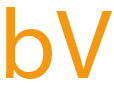
<style>
.page{position:relative;width:114px;height:96px;background:#ffffff}
.page>*{position:absolute;margin:0}
.t1{font:100px "MyriadPro-Regular";color:#f49711}
</style>
<div class="page">
<p class="t1" style="left:6px;top:7px;width:106px;height:72px">bV</p>
</div>
